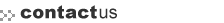
<style>
.page{position:relative;width:224px;height:23px;background:#ffffff}
.page>*{position:absolute;margin:0}
.t1{font:18px "Arial-Black";letter-spacing:0.013em;color:#333333}
.t2{font:18px "Arial-Black";letter-spacing:0.05em;color:#333333}
.t3{font:18px "ArialMT";letter-spacing:0.013em;color:#333333}
</style>
<div class="page">
<p class="t1" style="left:20px;top:5px;width:97px;height:14px">contac<span class="t2">t</span><span class="t3">us</span></p>
</div>
